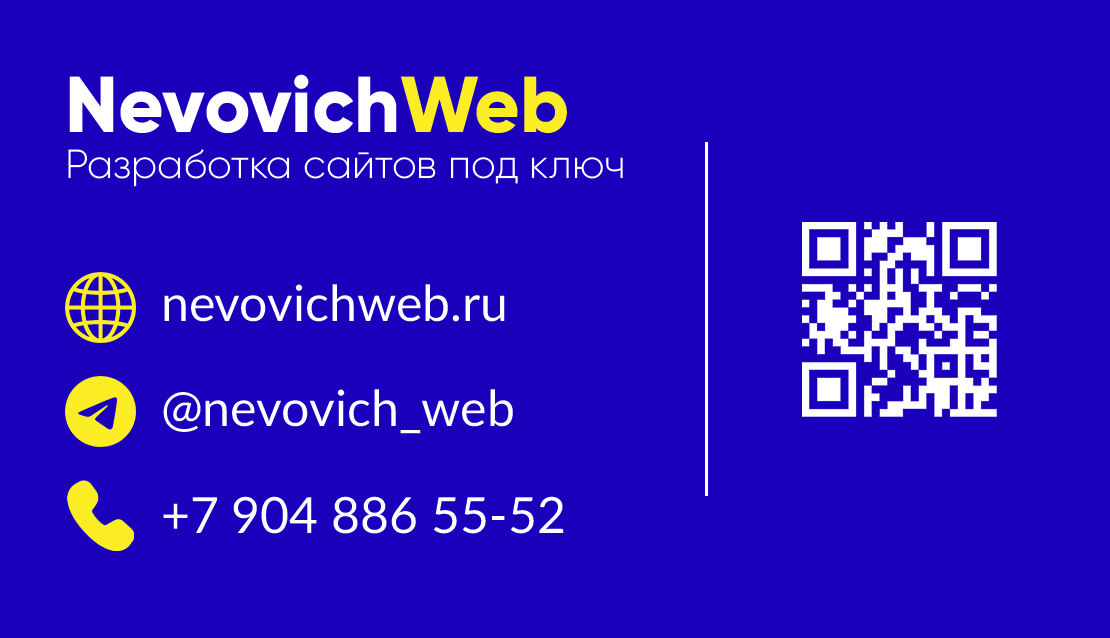
<style>
.page{position:relative;width:1110px;height:638px;background:#1a00ba}
.page>*{position:absolute;margin:0}
.t1{font:79.2px "Gilroy-ExtraBold";color:#ffffff}
.t2{font:79.2px "Gilroy-ExtraBold";color:#fbed24}
.t3{font:40.5px "Gilroy-Light";color:#ffffff}
.t4{font:50px "Lato-Regular";color:#ffffff}
</style>
<div class="page">
<p class="t1" style="left:69px;top:74px;width:498px;height:59px">Nevovich<span class="t2">Web</span></p>
<p class="t3" style="left:68px;top:149px;width:555px;height:38px">Разработка сайтов под ключ</p>
<p class="t4" style="left:164px;top:284px;width:341px;height:38px">nevovichweb.ru</p>
<p class="t4" style="left:163px;top:389px;width:350px;height:45px">@nevovich_web</p>
<p class="t4" style="left:163px;top:496px;width:401px;height:38px">+7 904 886 55-52</p>
</div>
